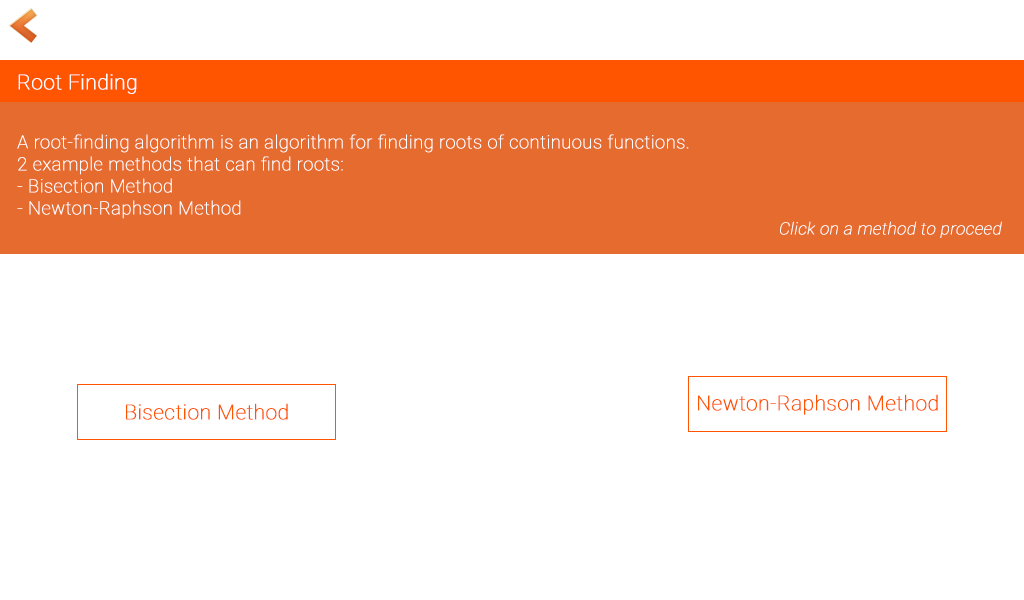
<style>
.page{position:relative;width:1024px;height:600px;background:#ffffff}
.page>*{position:absolute;margin:0}
.t1{font:20.8px "Roboto-Thin";color:#ffffff;font-weight:bold}
.t2{font:18.3px "Roboto-Thin";color:#ffffff;font-weight:bold}
.t3{font:16.7px "Roboto-Thin";color:#ffffff;font-weight:bold;font-style:italic}
.t4{font:20.8px "Roboto-Thin";color:#ff5500;font-weight:bold}
</style>
<div class="page">
<p class="t1" style="left:18px;top:73px;width:119px;height:21px">Root Finding</p>
<p class="t2" style="left:17px;top:134px;width:672px;height:85px">A root-finding algorithm is an algorithm for finding roots of continuous functions. <br>2 example methods that can find roots: <br>- Bisection Method<br>- Newton-Raphson Method</p>
<p class="t3" style="left:780px;top:221px;width:222px;height:17px">Click on a method to proceed</p>
<p class="t4" style="left:698px;top:394px;width:240px;height:21px">Newton-Raphson Method</p>
<p class="t4" style="left:126px;top:403px;width:162px;height:17px">Bisection Method</p>
</div>
